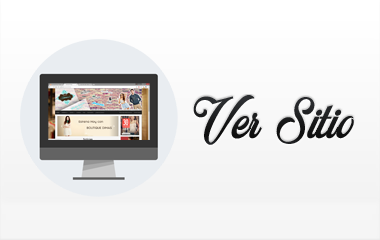
<style>
.page{position:relative;width:380px;height:240px}
.page>*{position:absolute;margin:0}
.t1{font:60px "MocharyPERSONALUSEONLY";color:#18191a}
</style>
<div class="page">
<p class="t1" style="left:193px;top:95px;width:161px;height:50px">Ver Sitio</p>
</div>
